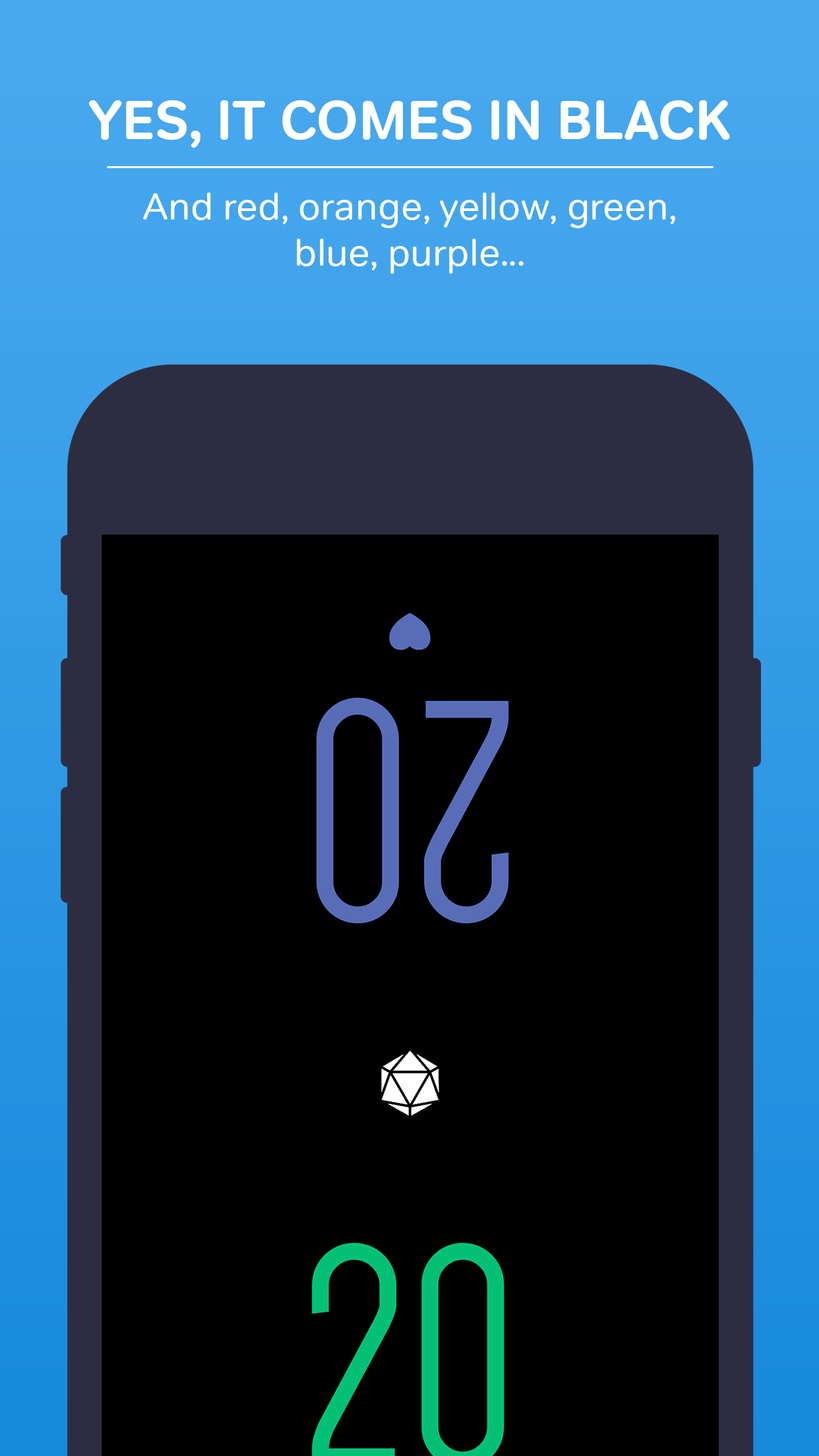
<style>
.page{position:relative;width:819px;height:1456px;background:#000000}
.page>*{position:absolute;margin:0}
.t1{font:55px "Tondo-Bold";color:#ffffff}
.t2{font:38.5px "Tondo-Regular";color:#ffffff}
</style>
<div class="page">
<p class="t1" style="left:88px;top:100px;width:642px;height:48px">YES, IT COMES IN BLACK</p>
<p class="t2" style="left:143px;top:193px;width:532px;height:81px;text-align:center">And red, orange, yellow, green,<br>blue, purple...</p>
</div>
